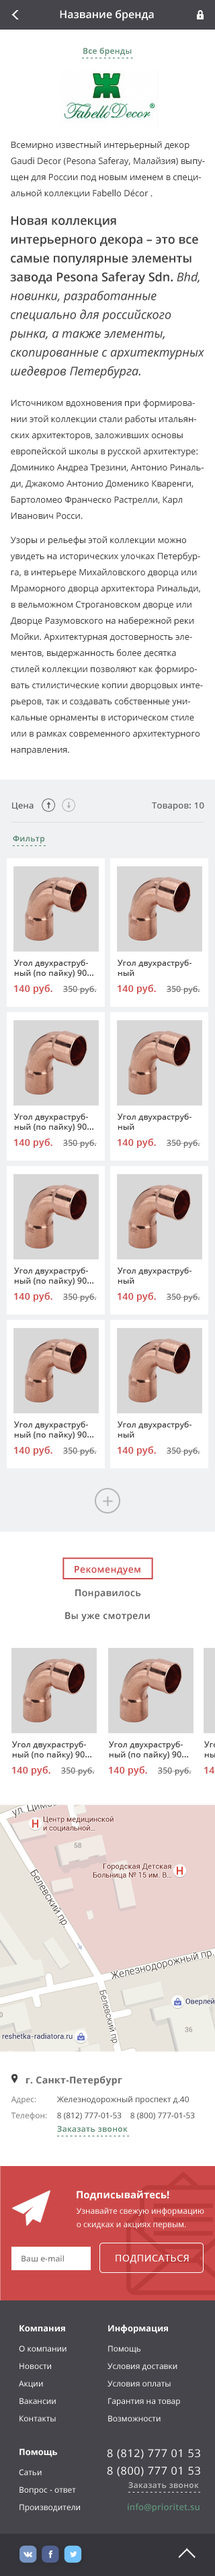
<style>
.page{position:relative;width:215px;height:2576px;background:#ffffff}
.page>*{position:absolute;margin:0}
.t1{font:10.8px "OpenSans-Semibold";color:#ffffff}
.t2{font:8.1px "OpenSans-Semibold";letter-spacing:0.025em;color:#54866f}
.t3{font:8.7px/16.1px "OpenSans";color:#3f3f3f}
.t4{font:8.7px/24.2px "OpenSans";color:#3f3f3f}
.t5{font:12.1px/18.8px "OpenSans-Italic";color:#3f3f3f}
.t6{font:12.1px/18.8px "OpenSans-Semibold";color:#3f3f3f}
.t7{font:8.7px "OpenSans";letter-spacing:0.025em;color:#5c5c5c}
.t8{font:8.1px "OpenSans";letter-spacing:0.025em;color:#3a3a3a}
.t9{font:9.4px "OpenSans-Semibold";letter-spacing:0.025em;color:#cd4949}
.t10{font:8.1px "OpenSans";letter-spacing:0.025em;color:#696969}
.t11{font:9.4px "OpenSans-Semibold";letter-spacing:0.025em;color:#5c5c5c}
.t12{font:9.4px "OpenSans-Bold";letter-spacing:0.025em;color:#6c6c6c}
.t13{font:8.1px/16.1px "OpenSans";color:#797979}
.t14{font:8.1px/16.1px "OpenSans";color:#4b4b4b}
.t15{font:8.1px/13.4px "OpenSans";color:#4b4b4b}
.t16{font:10.1px "OpenSans-Bold";color:#ffffff}
.t17{font:8.1px/13.4px "OpenSans";color:#ffffff}
.t18{font:8.1px "OpenSans-Semibold";color:#818181}
.t19{font:9.4px "OpenSans";letter-spacing:0.05em;color:#ffffff;text-transform:uppercase}
.t20{font:8.1px/17.5px "OpenSans";color:#ffffff}
.t21{font:8.7px/16.1px "OpenSans-Bold";color:#ffffff}
.t22{font:8.1px/20.2px "OpenSans";color:#ffffff}
.t23{font:10.8px/17.5px "OpenSans";letter-spacing:0.05em;color:#ffffff}
.t24{font:8.1px "OpenSans-Semibold";letter-spacing:0.025em;color:#bfbfbf}
.t25{font:8.7px "OpenSans-Semibold";letter-spacing:0.01em;color:#5f8e78}
</style>
<div class="page">
<p class="t1" style="left:60px;top:9px;width:94px;height:12px">Название бренда</p>
<p class="t2" style="left:83px;top:48px;width:49px;height:8px">Все бренды</p>
<p class="t3" style="left:10px;top:141px;width:195px;height:614px">Всемирно известный интерьерный декор Gaudi Decor (Pesona Saferay, Малайзия) выпущен для России под новым именем в специальной коллекции Fabello Décor . <br><br><br><br><br><br><br><br><br><br><br><br><br>Источником вдохновения при формировании этой коллекции стали работы итальянских архитекторов, заложивших основы европейской школы в русской архитектуре: Доминико Андреа Трезини, Антонио Ринальди, Джакомо Антонио Доменико Кваренги, Бартоломео Франческо Растрелли, Карл Иванович Росси. <br><span class="t4">Узоры и рельефы этой коллекции можно </span>увидеть на исторических улочках Петербурга, в интерьере Михайловского дворца или Мраморного дворца архитектора Ринальди, в вельможном Строгановском дворце или Дворце Разумовского на набережной реки Мойки. Архитектурная достоверность элементов, выдержанность более десятка стилей коллекции позволяют как формировать стилистические копии дворцовых интерьеров, так и создавать собственные уникальные орнаменты в историческом стиле или в рамках современного архитектурного направления.</p>
<p class="t5" style="left:10px;top:216px;width:194px;height:162px"><span class="t6">Новая коллекция интерьерного декора – это все самые популярные элементы завода Pesona Saferay Sdn. </span>Bhd, новинки, разработанные специально для российского рынка, а также элементы, скопированные с архитектурных шедевров Петербурга.</p>
<p class="t7" style="left:12px;top:802px;width:22px;height:8px">Цена</p>
<p class="t7" style="left:152px;top:802px;width:52px;height:9px">Товаров: 10</p>
<p class="t2" style="left:13px;top:835px;width:32px;height:8px">Фильтр</p>
<p class="t8" style="left:14px;top:960px;width:79px;height:18px">Угол двухраструбный (по пайку) 90...</p>
<p class="t8" style="left:118px;top:960px;width:74px;height:16px">Угол двухраструбный</p>
<p class="t9" style="left:14px;top:985px;width:38px;height:9px">140 руб.</p>
<p class="t10" style="left:63px;top:986px;width:34px;height:8px">350 руб.</p>
<p class="t9" style="left:118px;top:985px;width:38px;height:9px">140 руб.</p>
<p class="t10" style="left:167px;top:986px;width:33px;height:8px">350 руб.</p>
<p class="t8" style="left:14px;top:1114px;width:79px;height:18px">Угол двухраструбный (по пайку) 90...</p>
<p class="t8" style="left:118px;top:1114px;width:74px;height:16px">Угол двухраструбный</p>
<p class="t9" style="left:14px;top:1138px;width:38px;height:10px">140 руб.</p>
<p class="t10" style="left:63px;top:1140px;width:34px;height:8px">350 руб.</p>
<p class="t9" style="left:118px;top:1138px;width:38px;height:10px">140 руб.</p>
<p class="t10" style="left:167px;top:1140px;width:33px;height:8px">350 руб.</p>
<p class="t8" style="left:14px;top:1268px;width:79px;height:18px">Угол двухраструбный (по пайку) 90...</p>
<p class="t8" style="left:118px;top:1268px;width:74px;height:16px">Угол двухраструбный</p>
<p class="t9" style="left:14px;top:1292px;width:38px;height:10px">140 руб.</p>
<p class="t10" style="left:63px;top:1294px;width:34px;height:8px">350 руб.</p>
<p class="t9" style="left:118px;top:1292px;width:38px;height:10px">140 руб.</p>
<p class="t10" style="left:167px;top:1294px;width:33px;height:8px">350 руб.</p>
<p class="t8" style="left:14px;top:1421px;width:79px;height:19px">Угол двухраструбный (по пайку) 90...</p>
<p class="t8" style="left:118px;top:1421px;width:74px;height:17px">Угол двухраструбный</p>
<p class="t9" style="left:14px;top:1446px;width:38px;height:10px">140 руб.</p>
<p class="t10" style="left:63px;top:1448px;width:34px;height:8px">350 руб.</p>
<p class="t9" style="left:118px;top:1446px;width:38px;height:10px">140 руб.</p>
<p class="t10" style="left:167px;top:1448px;width:33px;height:8px">350 руб.</p>
<p class="t9" style="left:75px;top:1566px;width:65px;height:9px">Рекомендуем</p>
<p class="t11" style="left:75px;top:1589px;width:65px;height:10px">Понравилось</p>
<p class="t11" style="left:65px;top:1612px;width:85px;height:10px">Вы уже смотрели</p>
<p class="t8" style="left:12px;top:1741px;width:79px;height:18px">Угол двухраструбный (по пайку) 90...</p>
<p class="t8" style="left:109px;top:1741px;width:79px;height:18px">Угол двухраструбный (по пайку) 90...</p>
<p class="t8" style="left:204px;top:1741px;width:11px;height:16px">Угол двухраструбный</p>
<p class="t9" style="left:12px;top:1766px;width:38px;height:10px">140 руб.</p>
<p class="t10" style="left:61px;top:1768px;width:34px;height:8px">350 руб.</p>
<p class="t9" style="left:109px;top:1766px;width:38px;height:10px">140 руб.</p>
<p class="t10" style="left:158px;top:1768px;width:34px;height:8px">350 руб.</p>
<p class="t9" style="left:204px;top:1767px;width:11px;height:7px">140 руб.</p>
<p class="t12" style="left:26px;top:2076px;width:96px;height:10px">г. Санкт-Петербург</p>
<p class="t13" style="left:11px;top:2096px;width:36px;height:24px">Адрес:<br>Телефон:</p>
<p class="t14" style="left:56px;top:2096px;width:139px;height:24px">Железнодорожный проспект д.40  <br>8 (812) 777-01-53    <span class="t15">8 (800) 777-01-53</span></p>
<p class="t2" style="left:57px;top:2126px;width:71px;height:6px">Заказать звонок</p>
<p class="t16" style="left:77px;top:2190px;width:92px;height:10px">Подписывайтесь!</p>
<p class="t17" style="left:77px;top:2208px;width:127px;height:21px">Узнавайте свежую информацию <br>о скидках и акциях первым.</p>
<p class="t18" style="left:22px;top:2255px;width:42px;height:6px">Ваш e-mail</p>
<p class="t19" style="left:116px;top:2255px;width:73px;height:8px">подписаться</p>
<p class="t20" style="left:19px;top:2325px;width:48px;height:96px"><span class="t21">Компания<br></span><span class="t22">О компании<br></span>Новости<br>Акции<br>Вакансии<br>Контакты</p>
<p class="t20" style="left:108px;top:2325px;width:72px;height:96px"><span class="t21">Информация<br></span><span class="t22">Помощь<br></span>Условия доставки<br>Условия оплаты<br>Гарантия на товар<br>Возможности</p>
<p class="t20" style="left:19px;top:2448px;width:61px;height:64px"><span class="t21">Помощь<br></span><span class="t22">Сатьи<br></span>Вопрос - ответ<br>Производители</p>
<p class="t23" style="left:107px;top:2449px;width:93px;height:28px">8 (812) 777 01 53<br>8 (800) 777 01 53</p>
<p class="t24" style="left:128px;top:2482px;width:71px;height:6px">Заказать звонок</p>
<p class="t25" style="left:128px;top:2503px;width:72px;height:9px">info@prioritet.su</p>
</div>
